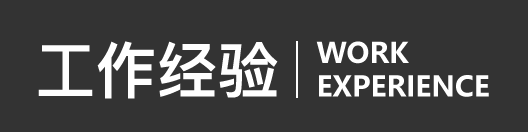
<style>
.page{position:relative;width:528px;height:132px;background:#333333}
.page>*{position:absolute;margin:0}
.t1{font:61px "PingFangSC-Heavy";color:#ffffff}
.t2{font:27.9px "MicrosoftYaHei-Bold";color:#ffffff}
</style>
<div class="page">
<p class="t1" style="left:38px;top:41px;width:240px;height:58px">工作经验</p>
<p class="t2" style="left:316px;top:41px;width:173px;height:56px">WORK<br>EXPERIENCE</p>
</div>
